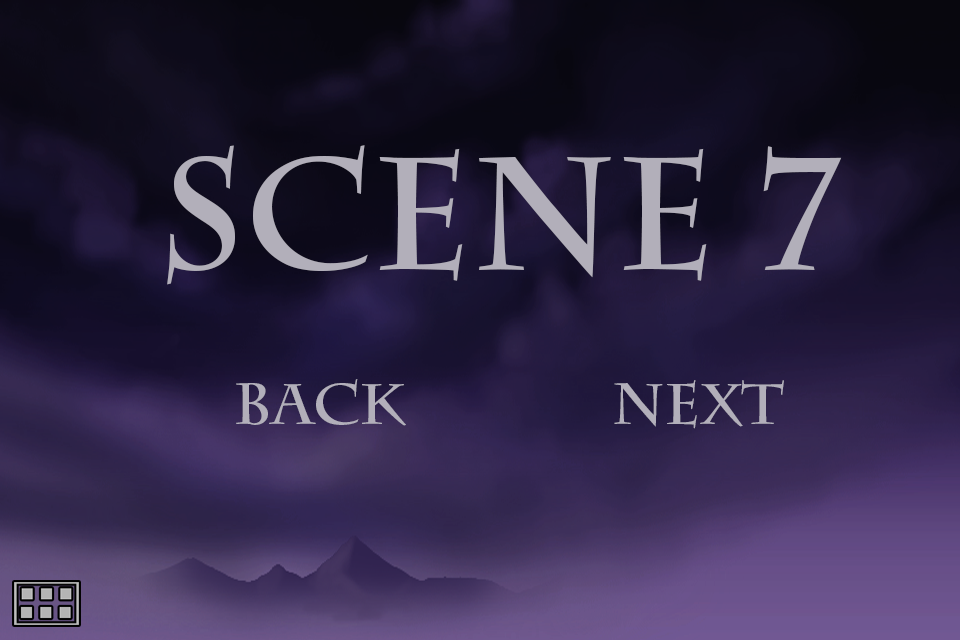
<style>
.page{position:relative;width:960px;height:640px}
.page>*{position:absolute;margin:0}
.t1{font:158px "CharlemagneStd-Bold";color:#b2afba}
.t2{font:57.7px "CharlemagneStd-Bold";color:#b2afba}
</style>
<div class="page">
<p class="t1" style="left:167px;top:145px;width:675px;height:140px">scene 7</p>
<p class="t2" style="left:236px;top:379px;width:170px;height:47px">back</p>
<p class="t2" style="left:614px;top:380px;width:170px;height:49px">Next</p>
</div>
